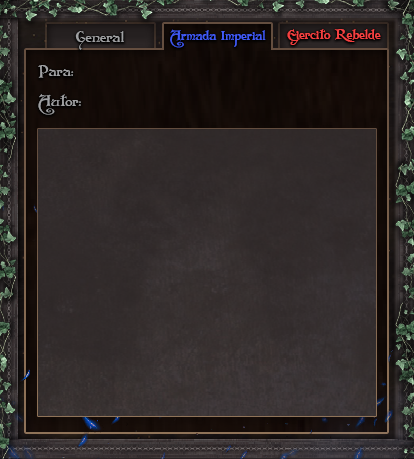
<style>
.page{position:relative;width:414px;height:459px}
.page>*{position:absolute;margin:0}
.t1{font:13.1px "Folkard";color:#415af6}
.t2{font:13.4px "Folkard";color:#f64141}
.t3{font:15.1px "Folkard";color:#a0a1a3}
</style>
<div class="page">
<p class="t1" style="left:170px;top:29px;width:96px;height:19px">Armada Imperial</p>
<p class="t2" style="left:287px;top:29px;width:94px;height:16px">Ejercito Rebelde</p>
<p class="t3" style="left:75px;top:31px;width:49px;height:19px">General</p>
<p class="t3" style="left:38px;top:65px;width:36px;height:13px">Para:</p>
<p class="t3" style="left:38px;top:94px;width:43px;height:21px">Autor:</p>
</div>
